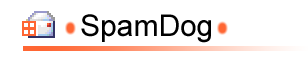
<style>
.page{position:relative;width:308px;height:59px;background:#ffffff}
.page>*{position:absolute;margin:0}
.t1{font:30px "ArialMT";color:#000000}
</style>
<div class="page">
<p class="t1" style="left:81px;top:14px;width:130px;height:29px">SpamDog</p>
</div>
